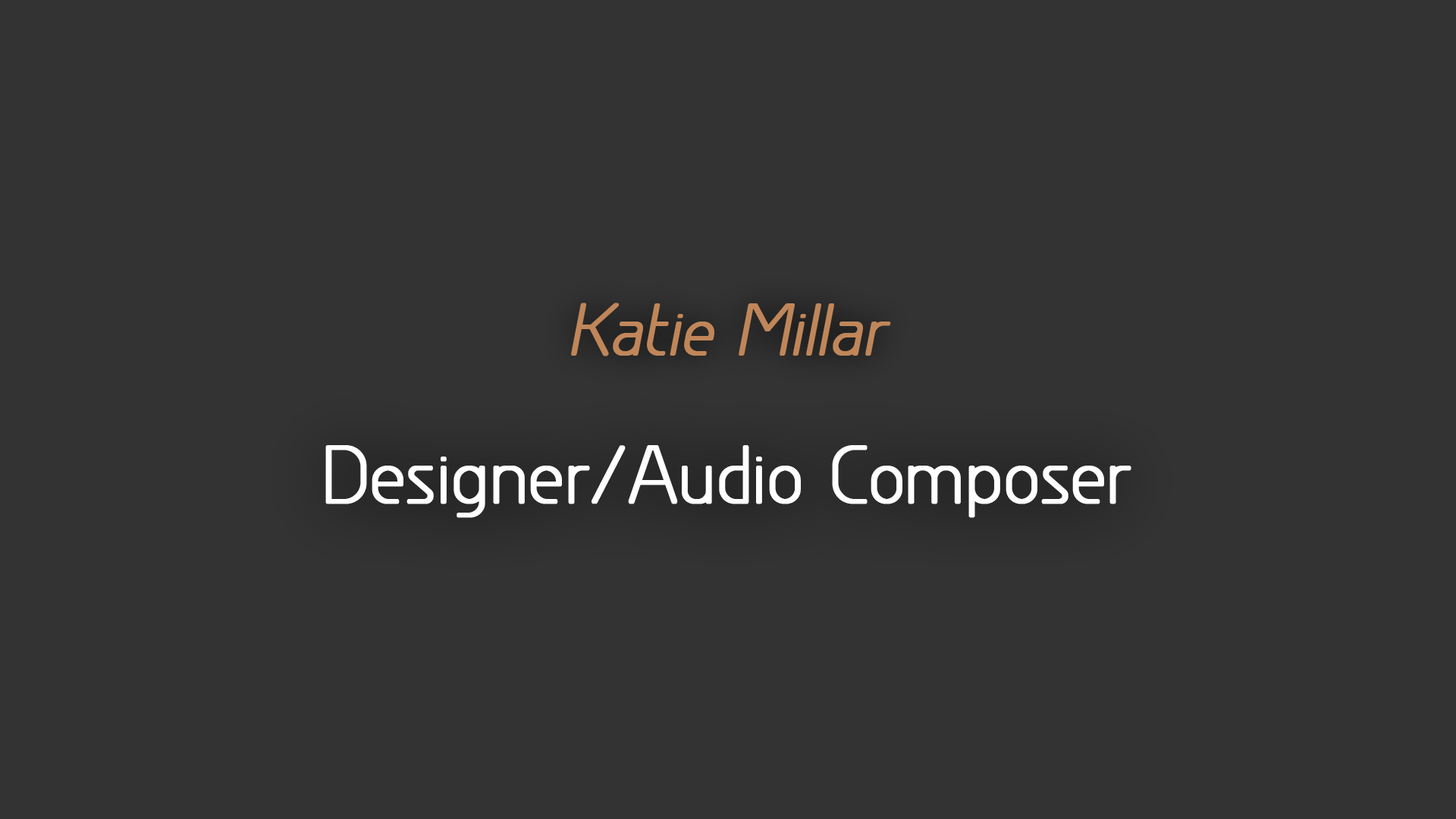
<style>
.page{position:relative;width:1456px;height:819px;background:#333333}
.page>*{position:absolute;margin:0}
.t1{font:68.2px "GreyscaleBasic";color:#c08659;font-weight:bold;font-style:italic}
.t2{font:75.8px "GreyscaleBasic";color:#ffffff;font-weight:bold}
</style>
<div class="page">
<p class="t1" style="left:571px;top:303px;width:320px;height:53px">Katie Millar</p>
<p class="t2" style="left:325px;top:445px;width:806px;height:73px">Designer/Audio Composer</p>
</div>
